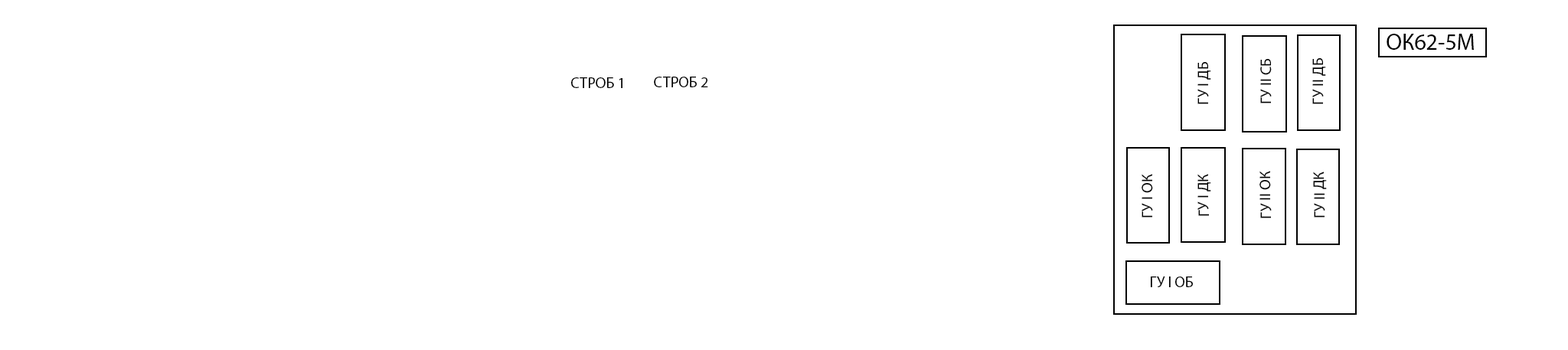
<style>
.page{position:relative;width:1568px;height:350px;background:#ffffff}
.page>*{position:absolute;margin:0}
.t1{font:23px "MyriadPro-Regular";color:#000000}
.t2{font:15.3px "MyriadPro-Regular";color:#000000}
</style>
<div class="page">
<p class="t1" style="left:1387px;top:34px;width:87px;height:16px">ОК62-5М</p>
<p class="t2" style="left:1197px;top:62px;width:14px;height:42px;rotate:-90deg">ГУ I ДБ</p>
<p class="t2" style="left:1260px;top:59px;width:12px;height:44px;rotate:-90deg">ГУ II CБ</p>
<p class="t2" style="left:1312px;top:58px;width:14px;height:46px;rotate:-90deg">ГУ II ДБ</p>
<p class="t2" style="left:571px;top:77px;width:51px;height:11px">СТРОБ 1</p>
<p class="t2" style="left:654px;top:77px;width:54px;height:10px">СТРОБ 2</p>
<p class="t2" style="left:1142px;top:174px;width:11px;height:43px;rotate:-90deg">ГУ I ОК</p>
<p class="t2" style="left:1197px;top:174px;width:14px;height:42px;rotate:-90deg">ГУ I ДК</p>
<p class="t2" style="left:1259px;top:171px;width:13px;height:47px;rotate:-90deg">ГУ II ОК</p>
<p class="t2" style="left:1313px;top:172px;width:14px;height:45px;rotate:-90deg">ГУ II ДК</p>
<p class="t2" style="left:1151px;top:276px;width:42px;height:11px">ГУ I ОБ</p>
</div>
